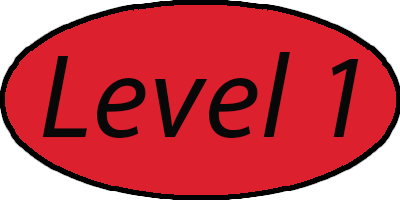
<style>
.page{position:relative;width:400px;height:200px;background:#dd202d}
.page>*{position:absolute;margin:0}
.t1{font:120px "MyriadPro-It";letter-spacing:0.01em;color:#090808}
</style>
<div class="page">
<p class="t1" style="left:42px;top:52px;width:317px;height:87px">Level 1</p>
</div>
